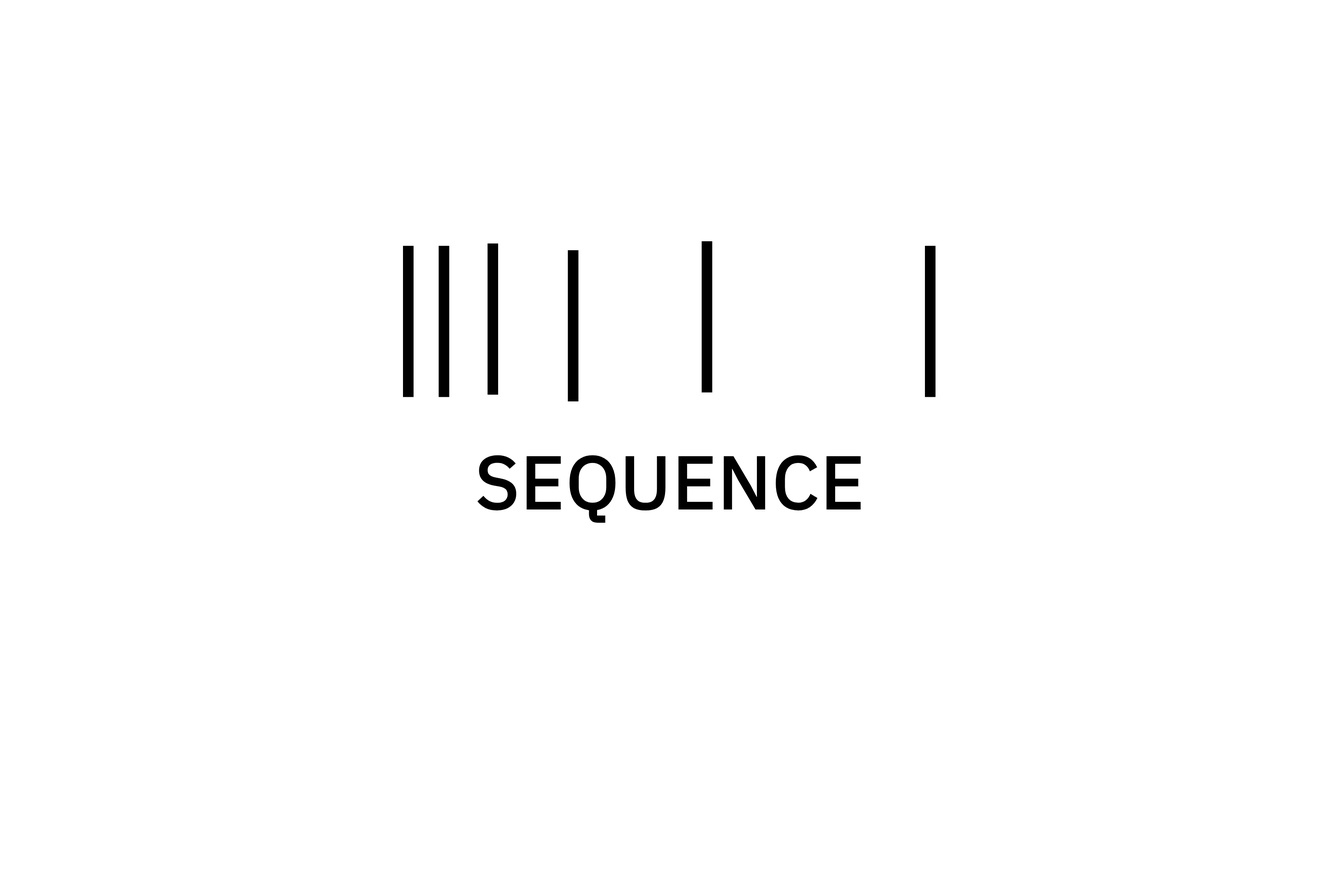
<style>
.page{position:relative;width:1337px;height:892px;background:#ffffff}
.page>*{position:absolute;margin:0}
.t1{font:76.4px "IBMPlexSans-Medium";color:#000000}
</style>
<div class="page">
<p class="t1" style="left:478px;top:455px;width:383px;height:67px">SEQUENCE</p>
</div>
